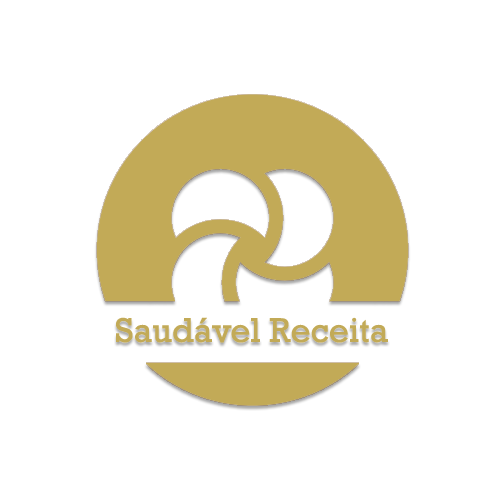
<style>
.page{position:relative;width:504px;height:500px;background:#ffffff}
.page>*{position:absolute;margin:0}
.t1{font:35px "Rockwell";color:#c2aa57}
</style>
<div class="page">
<p class="t1" style="left:116px;top:317px;width:272px;height:26px">Saudável Receita</p>
</div>
